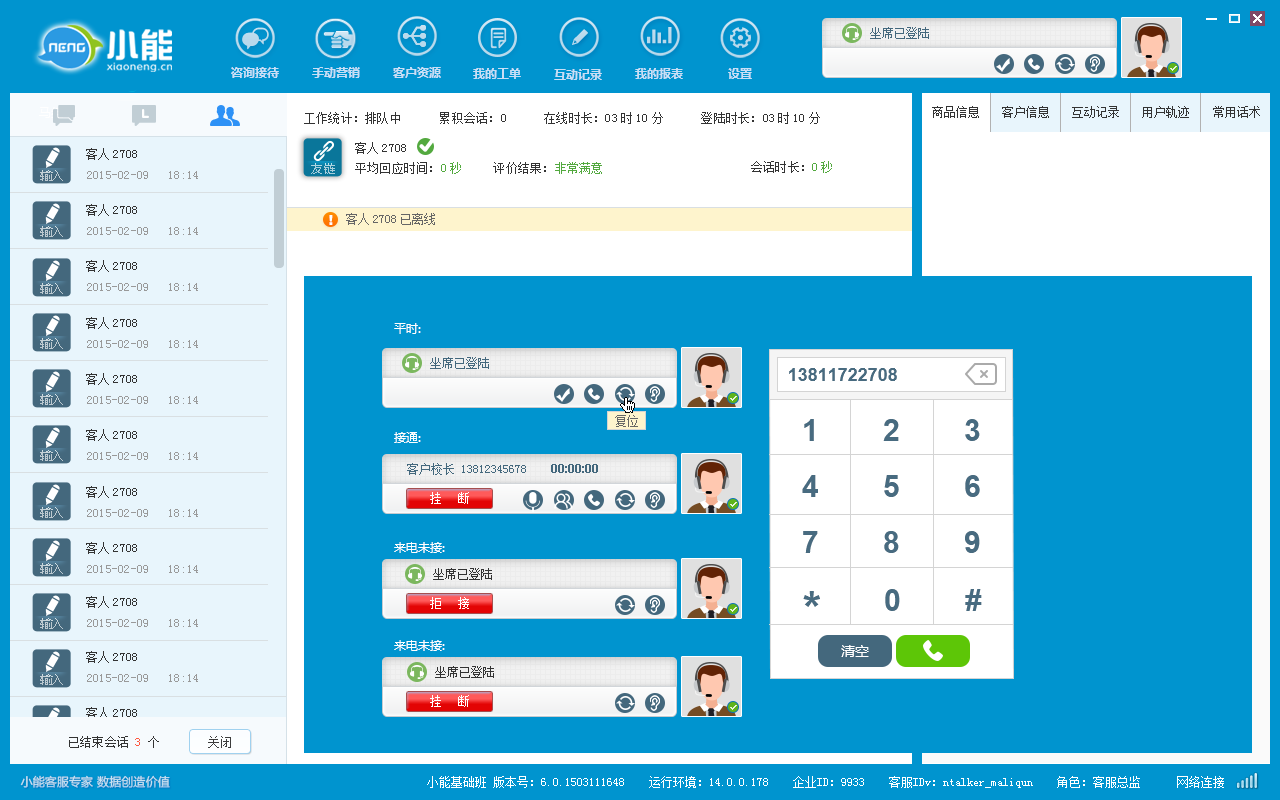
<style>
.page{position:relative;width:1280px;height:800px;background:#0094cf}
.page>*{position:absolute;margin:0}
.t1{font:12px "NSimSun";color:#44687d;text-transform:uppercase}
.t2{font:12px "MicrosoftYaHei-Bold";color:#c8dff6}
.t3{font:12px "SimSun";letter-spacing:0.02em;color:#333333}
.t4{font:12px "SimSun";color:#333333}
.t5{font:12px "SimSun";letter-spacing:0.02em;color:#53a93f}
.t6{font:12px "SimSun";letter-spacing:0.02em;color:#999999}
.t7{font:14px "Arial-Black";color:#ffffff}
.t8{font:12px "SimSun";color:#666666}
.t9{font:12px "MicrosoftYaHei";color:#ffffff;text-transform:uppercase}
.t10{font:18px "Arial-BoldMT";color:#486b80;text-transform:uppercase}
.t11{font:12px "SimSun";color:#666666;text-transform:uppercase}
.t12{font:30px/28px "Arial-BoldMT";color:#486b80;text-transform:uppercase}
.t13{font:12px "SimSun";color:#44687d;text-transform:uppercase}
.t14{font:12px "Arial-BoldMT";color:#44687d;text-transform:uppercase}
.t15{font:13px "SimSun";letter-spacing:0.02em;color:#ffffff}
.t16{font:12px "NSimSun";color:#333333;text-transform:uppercase}
.t17{font:48px "Arial-BoldMT";color:#486b80;text-transform:uppercase}
.t18{font:30px "Arial-BoldMT";color:#486b80;text-transform:uppercase}
.t19{font:14px "MicrosoftYaHei";color:#ffffff;text-transform:uppercase}
.t20{font:12px "SimSun";letter-spacing:0.02em;color:#ff5840}
.t21{font:12px "SimSun";letter-spacing:0.02em;color:#3d3d3d}
.t22{font:12px "MicrosoftYaHei";letter-spacing:0.02em;color:#cbe2f1}
.t23{font:12px "SimSun";color:#ffffff}
</style>
<div class="page">
<p class="t1" style="left:870px;top:27px;width:59px;height:12px">坐席已登陆</p>
<p class="t2" style="left:231px;top:67px;width:48px;height:11px">咨询接待</p>
<p class="t2" style="left:312px;top:67px;width:48px;height:11px">手动营销</p>
<p class="t2" style="left:393px;top:67px;width:48px;height:11px">客户资源</p>
<p class="t2" style="left:473px;top:68px;width:48px;height:11px">我的工单</p>
<p class="t2" style="left:554px;top:69px;width:48px;height:11px">互动记录</p>
<p class="t2" style="left:635px;top:68px;width:48px;height:11px">我的报表</p>
<p class="t2" style="left:728px;top:68px;width:24px;height:11px">设置</p>
<p class="t3" style="left:304px;top:112px;width:516px;height:12px">工作统计：排队中      累积会话：0      在线时长：03时10分      登陆时长：03时10分</p>
<p class="t4" style="left:932px;top:106px;width:47px;height:12px">商品信息</p>
<p class="t4" style="left:1002px;top:106px;width:47px;height:12px">客户信息</p>
<p class="t4" style="left:1072px;top:106px;width:47px;height:12px">互动记录</p>
<p class="t4" style="left:1142px;top:106px;width:47px;height:12px">用户轨迹</p>
<p class="t4" style="left:1213px;top:106px;width:47px;height:12px">常用话术</p>
<p class="t3" style="left:86px;top:148px;width:51px;height:12px">客人2708</p>
<p class="t3" style="left:355px;top:142px;width:51px;height:12px">客人2708</p>
<p class="t3" style="left:751px;top:161px;width:81px;height:12px">会话时长：<span class="t5">0秒</span></p>
<p class="t6" style="left:87px;top:171px;width:111px;height:8px">2015-02-09   18:14</p>
<p class="t3" style="left:355px;top:162px;width:247px;height:12px">平均回应时间：<span class="t5">0秒</span>     评价结果：<span class="t5">非常满意</span></p>
<p class="t3" style="left:86px;top:204px;width:51px;height:12px">客人2708</p>
<p class="t7" style="left:329px;top:215px;width:4px;height:10px">!</p>
<p class="t8" style="left:346px;top:213px;width:89px;height:12px">客人2708已离线</p>
<p class="t6" style="left:87px;top:227px;width:111px;height:8px">2015-02-09   18:14</p>
<p class="t3" style="left:86px;top:260px;width:51px;height:12px">客人2708</p>
<p class="t6" style="left:87px;top:283px;width:111px;height:8px">2015-02-09   18:14</p>
<p class="t3" style="left:86px;top:317px;width:51px;height:12px">客人2708</p>
<p class="t9" style="left:394px;top:323px;width:27px;height:11px">平时:</p>
<p class="t6" style="left:87px;top:340px;width:111px;height:8px">2015-02-09   18:14</p>
<p class="t1" style="left:430px;top:357px;width:59px;height:12px">坐席已登陆</p>
<p class="t3" style="left:86px;top:373px;width:51px;height:12px">客人2708</p>
<p class="t10" style="left:789px;top:368px;width:108px;height:13px">13811722708</p>
<p class="t6" style="left:87px;top:396px;width:111px;height:8px">2015-02-09   18:14</p>
<p class="t11" style="left:615px;top:415px;width:23px;height:12px">复位</p>
<p class="t12" style="left:802px;top:419px;width:178px;height:134px">1        2        3<br><br>4        5        6<br><br>7        8        9</p>
<p class="t3" style="left:86px;top:429px;width:51px;height:12px">客人2708</p>
<p class="t9" style="left:394px;top:432px;width:27px;height:11px">接通:</p>
<p class="t6" style="left:87px;top:452px;width:111px;height:8px">2015-02-09   18:14</p>
<p class="t13" style="left:407px;top:463px;width:191px;height:12px">客户校长 13812345678    <span class="t14">00:00:00</span></p>
<p class="t3" style="left:86px;top:486px;width:51px;height:12px">客人2708</p>
<p class="t15" style="left:430px;top:492px;width:39px;height:12px">挂  断</p>
<p class="t6" style="left:87px;top:509px;width:111px;height:8px">2015-02-09   18:14</p>
<p class="t3" style="left:86px;top:542px;width:51px;height:12px">客人2708</p>
<p class="t9" style="left:394px;top:542px;width:51px;height:11px">来电未接:</p>
<p class="t6" style="left:87px;top:565px;width:111px;height:8px">2015-02-09   18:14</p>
<p class="t16" style="left:433px;top:568px;width:59px;height:12px">坐席已登陆</p>
<p class="t17" style="left:803px;top:591px;width:17px;height:16px">*</p>
<p class="t18" style="left:885px;top:589px;width:97px;height:22px">0        #</p>
<p class="t3" style="left:86px;top:596px;width:51px;height:12px">客人2708</p>
<p class="t15" style="left:430px;top:597px;width:39px;height:12px">拒  接</p>
<p class="t6" style="left:87px;top:619px;width:111px;height:8px">2015-02-09   18:14</p>
<p class="t9" style="left:394px;top:640px;width:51px;height:11px">来电未接:</p>
<p class="t3" style="left:86px;top:651px;width:51px;height:12px">客人2708</p>
<p class="t19" style="left:841px;top:645px;width:28px;height:12px">清空</p>
<p class="t6" style="left:87px;top:674px;width:111px;height:8px">2015-02-09   18:14</p>
<p class="t16" style="left:435px;top:666px;width:59px;height:12px">坐席已登陆</p>
<p class="t15" style="left:430px;top:695px;width:39px;height:12px">挂  断</p>
<p class="t3" style="left:86px;top:707px;width:51px;height:12px">客人2708</p>
<p class="t3" style="left:69px;top:736px;width:90px;height:12px">已结束会话 <span class="t20">3</span> 个</p>
<p class="t21" style="left:208px;top:736px;width:23px;height:12px">关闭</p>
<p class="t22" style="left:20px;top:775px;width:150px;height:13px">小能客服专家 数据创造价值</p>
<p class="t23" style="left:427px;top:776px;width:797px;height:12px">小能基础班 版本号：6.0.1503111648    运行环境：14.0.0.178    企业ID：9933    客服IDv：ntalker_maliqun    角色：客服总监      网络连接</p>
</div>
